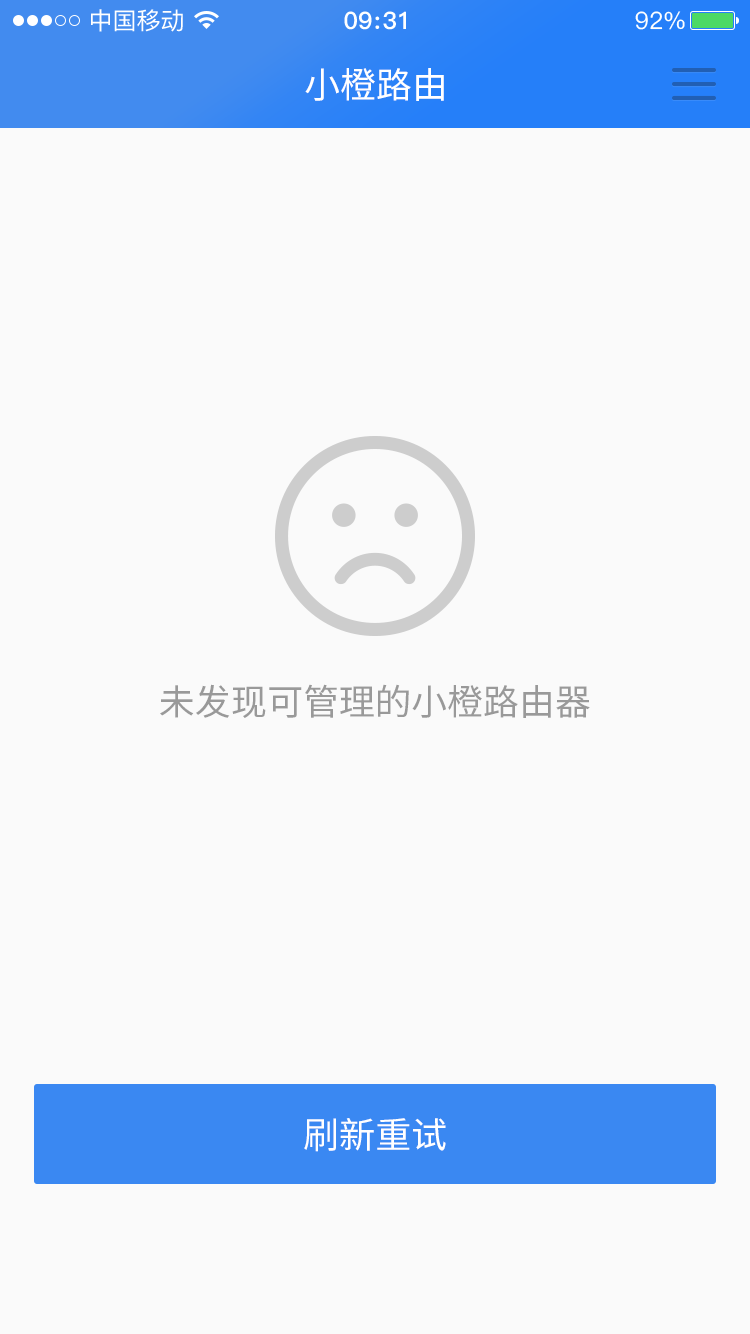
<style>
.page{position:relative;width:750px;height:1334px;background:#fafafa}
.page>*{position:absolute;margin:0}
.t1{font:36px "SourceHanSansCN-Regular";color:#ffffff}
.t2{font:36px "SourceHanSansCN-Regular";color:#999999}
</style>
<div class="page">
<p class="t1" style="left:305px;top:68px;width:139px;height:33px">小橙路由</p>
<p class="t2" style="left:160px;top:684px;width:430px;height:34px">未发现可管理的小橙路由器</p>
<p class="t1" style="left:304px;top:1118px;width:142px;height:34px">刷新重试</p>
</div>
